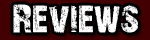
<style>
.page{position:relative;width:150px;height:40px;background:#000000}
.page>*{position:absolute;margin:0}
.t1{font:40px "28DaysLater";color:#ffffff}
</style>
<div class="page">
<p class="t1" style="left:13px;top:4px;width:125px;height:29px">Reviews</p>
</div>
